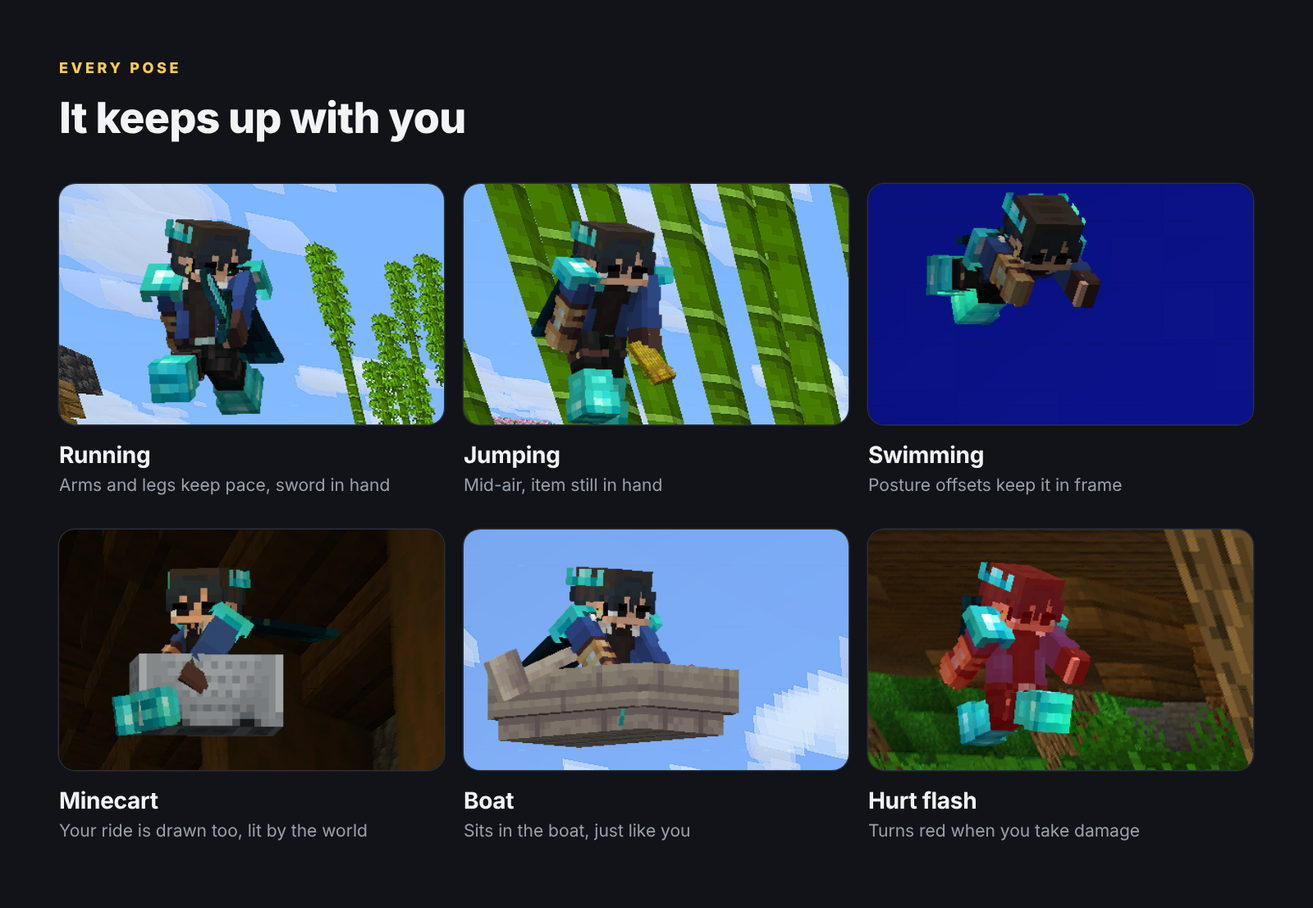
<style>
.page{position:relative;width:1313px;height:908px;background:#111318}
.page>*{position:absolute;margin:0}
.t1{font:14.8px "Inter-ExtraBold";letter-spacing:0.2em;color:#ffcc4d}
.t2{font:42.7px "Inter-ExtraBold";letter-spacing:-0.015em;color:#f2f3f5}
.t3{font:23px "Inter-Bold";letter-spacing:-0.011em;color:#f2f3f5}
.t4{font:17.2px "Inter-Regular";color:#9aa0ab}
</style>
<div class="page">
<p class="t1" style="left:60px;top:62px;width:118px;height:12px">EVERY POSE</p>
<p class="t2" style="left:61px;top:99px;width:404px;height:43px">It keeps up with you</p>
<p class="t3" style="left:60px;top:445px;width:89px;height:23px">Running</p>
<p class="t3" style="left:464px;top:445px;width:96px;height:23px">Jumping</p>
<p class="t3" style="left:869px;top:445px;width:114px;height:23px">Swimming</p>
<p class="t4" style="left:59px;top:478px;width:330px;height:17px">Arms and legs keep pace, sword in hand</p>
<p class="t4" style="left:465px;top:478px;width:197px;height:16px">Mid-air, item still in hand</p>
<p class="t4" style="left:869px;top:478px;width:253px;height:17px">Posture offsets keep it in frame</p>
<p class="t3" style="left:60px;top:791px;width:98px;height:18px">Minecart</p>
<p class="t3" style="left:465px;top:791px;width:49px;height:18px">Boat</p>
<p class="t3" style="left:869px;top:791px;width:107px;height:18px">Hurt flash</p>
<p class="t4" style="left:59px;top:823px;width:308px;height:18px">Your ride is drawn too, lit by the world</p>
<p class="t4" style="left:465px;top:823px;width:225px;height:18px">Sits in the boat, just like you</p>
<p class="t4" style="left:869px;top:823px;width:270px;height:18px">Turns red when you take damage</p>
</div>
